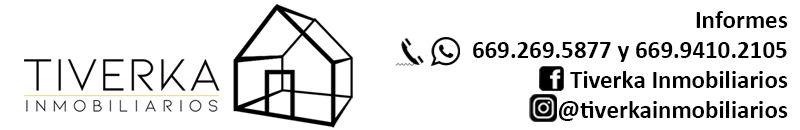
<style>
.page{position:relative;width:800px;height:130px;background:#ffffff}
.page>*{position:absolute;margin:0}
.t1{font:25px "Calibri-Bold";color:#000000}
</style>
<div class="page">
<p class="t1" style="left:473px;top:11px;width:315px;height:110px;text-align:right">Informes<br>669.269.5877 y 669.9410.2105<br>Tiverka Inmobiliarios<br>@tiverkainmobiliarios</p>
</div>
